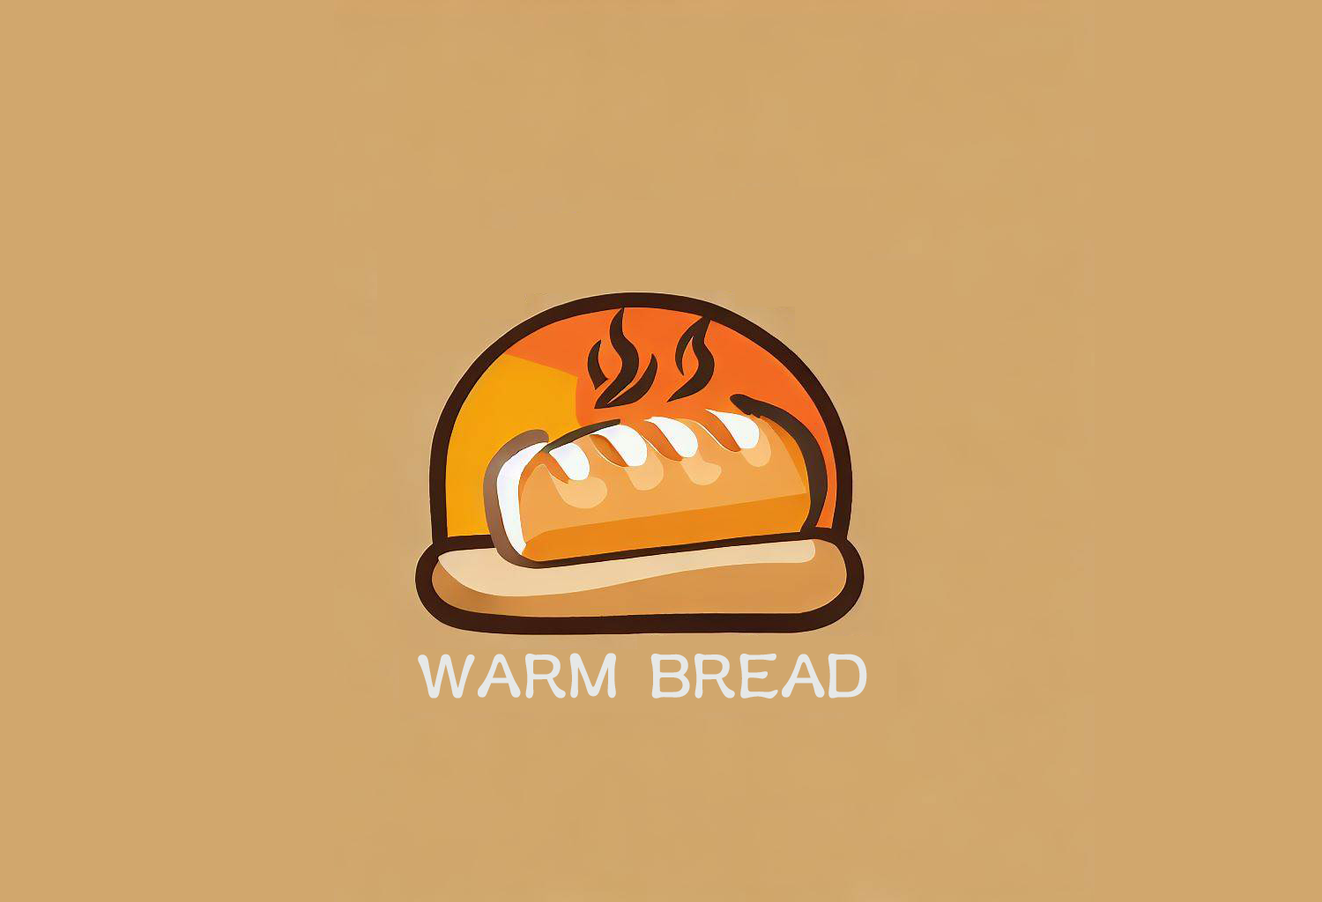
<style>
.page{position:relative;width:1322px;height:902px;background:#d1a76d}
.page>*{position:absolute;margin:0}
.t1{font:58.7px "MDSol";color:#e6e8e7}
</style>
<div class="page">
<p class="t1" style="left:418px;top:653px;width:449px;height:46px">WARM BREAD</p>
</div>
